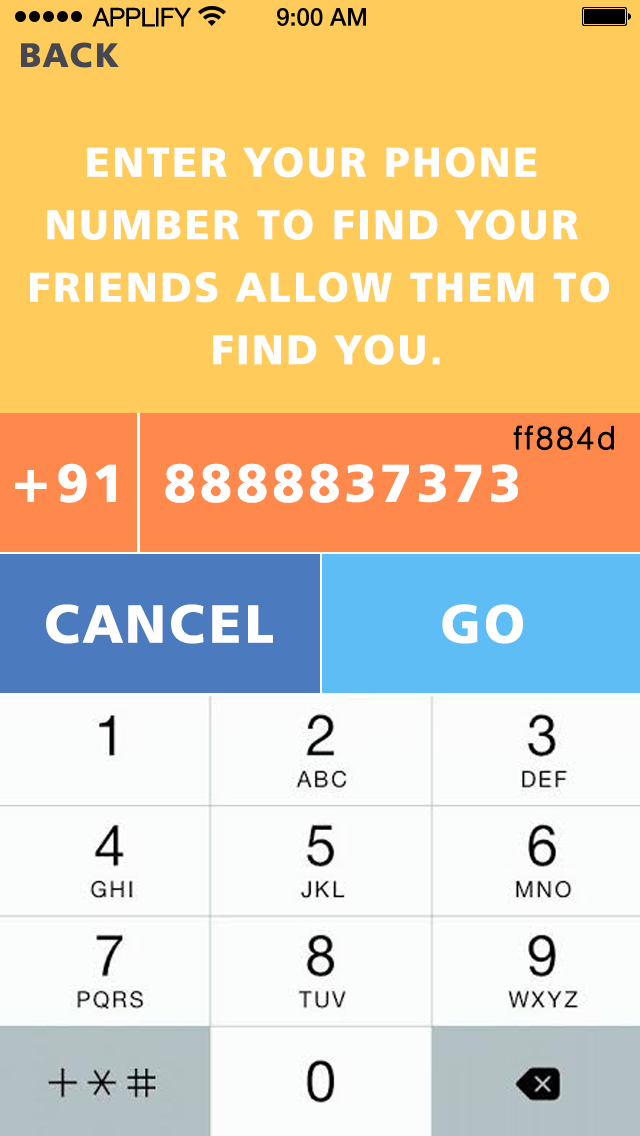
<style>
.page{position:relative;width:640px;height:1136px;background:#ffcc5c}
.page>*{position:absolute;margin:0}
.t1{font:25px "HelveticaNeueLTCom-Lt";letter-spacing:-0.02em;color:#000000;font-weight:bold}
.t2{font:58.3px "Humanist777BT-BlackB";letter-spacing:0.06em;color:#464751}
.t3{font:70.8px/62.5px "Humanist777BT-BlackB";letter-spacing:0.06em;color:#ffffff}
.t4{font:54.2px "HelveticaLTStd-Light";letter-spacing:0.06em;color:#000000;font-weight:bold}
.t5{font:91.7px "Humanist777BT-BlackB";letter-spacing:0.06em;color:#ffffff}
</style>
<div class="page">
<p class="t1" style="left:92px;top:7px;width:99px;height:20px">APPLIFY</p>
<p class="t2" style="left:21px;top:42px;width:98px;height:26px">BACK</p>
<p class="t3" style="left:30px;top:147px;width:579px;height:218px;text-align:center">ENTER YOUR PHONE <br>NUMBER TO FIND YOUR <br>FRIENDS ALLOW THEM TO<br> FIND YOU.</p>
<p class="t4" style="left:513px;top:425px;width:101px;height:26px">ff884d</p>
<p class="t5" style="left:15px;top:463px;width:101px;height:40px">+91</p>
<p class="t5" style="left:165px;top:463px;width:353px;height:40px">8888837373</p>
<p class="t5" style="left:46px;top:604px;width:227px;height:40px">CANCEL</p>
<p class="t5" style="left:46px;top:604px;width:227px;height:40px">CANCEL</p>
<p class="t5" style="left:442px;top:604px;width:81px;height:40px">GO</p>
</div>
